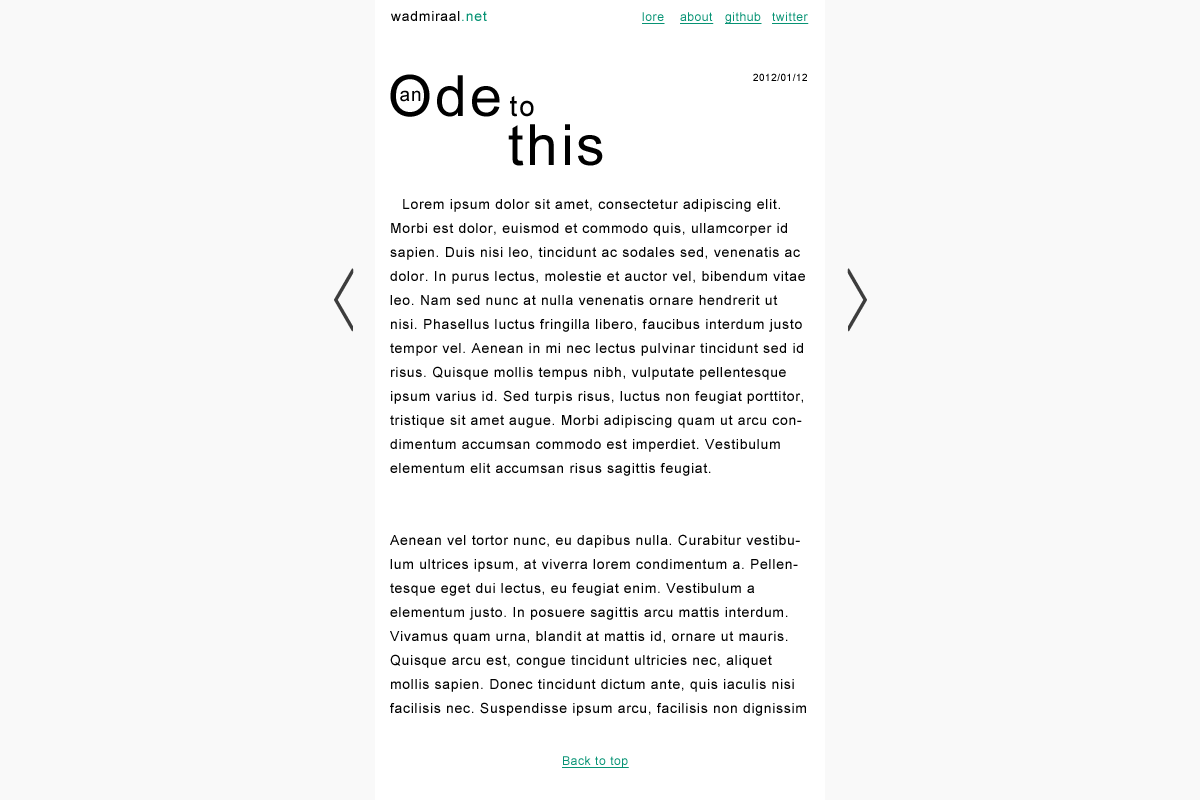
<style>
.page{position:relative;width:1200px;height:800px;background:#f9f9f9}
.page>*{position:absolute;margin:0}
.t1{font:14px "ArialMT";letter-spacing:0.05em;color:#000000}
.t2{font:14px "ArialMT";letter-spacing:0.05em;color:#079374}
.t3{font:12px "ArialMT";letter-spacing:0.05em;color:#079374;text-decoration:underline}
.t4{font:56.9px "ArialMT";letter-spacing:0.05em;color:#000000}
.t5{font:10px "ArialMT";letter-spacing:0.05em;color:#000000}
.t6{font:19px "ArialMT";letter-spacing:0.05em;color:#000000}
.t7{font:28.4px "ArialMT";letter-spacing:0.05em;color:#000000}
.t8{font:14px/24px "ArialMT";letter-spacing:0.05em;color:#000000}
.t9{font:123.8px "CourierNewPSMT";letter-spacing:0.05em;color:#3d3d3d;scale:0.33 1}
</style>
<div class="page">
<p class="t1" style="left:391px;top:11px;width:96px;height:10px">wadmiraal<span class="t2">.net</span></p>
<p class="t3" style="left:642px;top:12px;width:23px;height:12px">lore</p>
<p class="t3" style="left:680px;top:12px;width:34px;height:12px">about</p>
<p class="t3" style="left:725px;top:12px;width:37px;height:12px">github</p>
<p class="t3" style="left:772px;top:12px;width:37px;height:12px">twitter</p>
<p class="t4" style="left:390px;top:74px;width:110px;height:43px">Ode</p>
<p class="t5" style="left:753px;top:73px;width:54px;height:8px">2012/01/12</p>
<p class="t6" style="left:400px;top:90px;width:21px;height:12px">an</p>
<p class="t7" style="left:510px;top:96px;width:24px;height:21px">to</p>
<p class="t4" style="left:508px;top:124px;width:95px;height:42px">this</p>
<p class="t8" style="left:390px;top:199px;width:416px;height:517px">Lorem ipsum dolor sit amet, consectetur adipiscing elit. Morbi est dolor, euismod et commodo quis, ullamcorper id sapien. Duis nisi leo, tincidunt ac sodales sed, venenatis ac dolor. In purus lectus, molestie et auctor vel, bibendum vitae leo. Nam sed nunc at nulla venenatis ornare hendrerit ut nisi. Phasellus luctus fringilla libero, faucibus interdum justo tempor vel. Aenean in mi nec lectus pulvinar tincidunt sed id risus. Quisque mollis tempus nibh, vulputate pellentesque ipsum varius id. Sed turpis risus, luctus non feugiat porttitor, tristique sit amet augue. Morbi adipiscing quam ut arcu condimentum accumsan commodo est imperdiet. Vestibulum elementum elit accumsan risus sagittis feugiat.<br><br>Aenean vel tortor nunc, eu dapibus nulla. Curabitur vestibulum ultrices ipsum, at viverra lorem condimentum a. Pellentesque eget dui lectus, eu feugiat enim. Vestibulum a elementum justo. In posuere sagittis arcu mattis interdum. Vivamus quam urna, blandit at mattis id, ornare ut mauris. Quisque arcu est, congue tincidunt ultricies nec, aliquet mollis sapien. Donec tincidunt dictum ante, quis iaculis nisi facilisis nec. Suspendisse ipsum arcu, facilisis non dignissim venenatis, dapibus non ante.<br><br>Aliquam venenatis massa non leo ullamcorper at varius ligula eleifend. Vestibulu.</p>
<p class="t9" style="left:334px;top:268px;width:20px;height:64px">&lt;</p>
<p class="t9" style="left:847px;top:268px;width:20px;height:64px;rotate:180deg">&lt;</p>
<p class="t3" style="left:562px;top:756px;width:67px;height:12px">Back to top</p>
</div>
